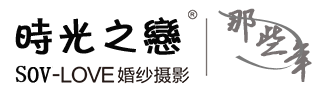
<style>
.page{position:relative;width:326px;height:90px;background:#ffffff}
.page>*{position:absolute;margin:0}
.t1{font:42px "FZKATFW--GB1-0";color:#060606;font-weight:bold}
.t2{font:42px "ÊéÌå·»ÕÔ¾Å½­¸Ö±ÊÐÐÊé";color:#797373;font-weight:bold}
.t3{font:23px "NSimSun";color:#050505;font-weight:bold}
</style>
<div class="page">
<p class="t1" style="left:15px;top:17px;width:166px;height:38px">时光之恋</p>
<p class="t2" style="left:227px;top:8px;width:29px;height:35px">那</p>
<p class="t2" style="left:256px;top:25px;width:32px;height:32px">些</p>
<p class="t2" style="left:284px;top:39px;width:28px;height:43px">年</p>
<p class="t3" style="left:15px;top:65px;width:36px;height:18px">SOV</p>
</div>
